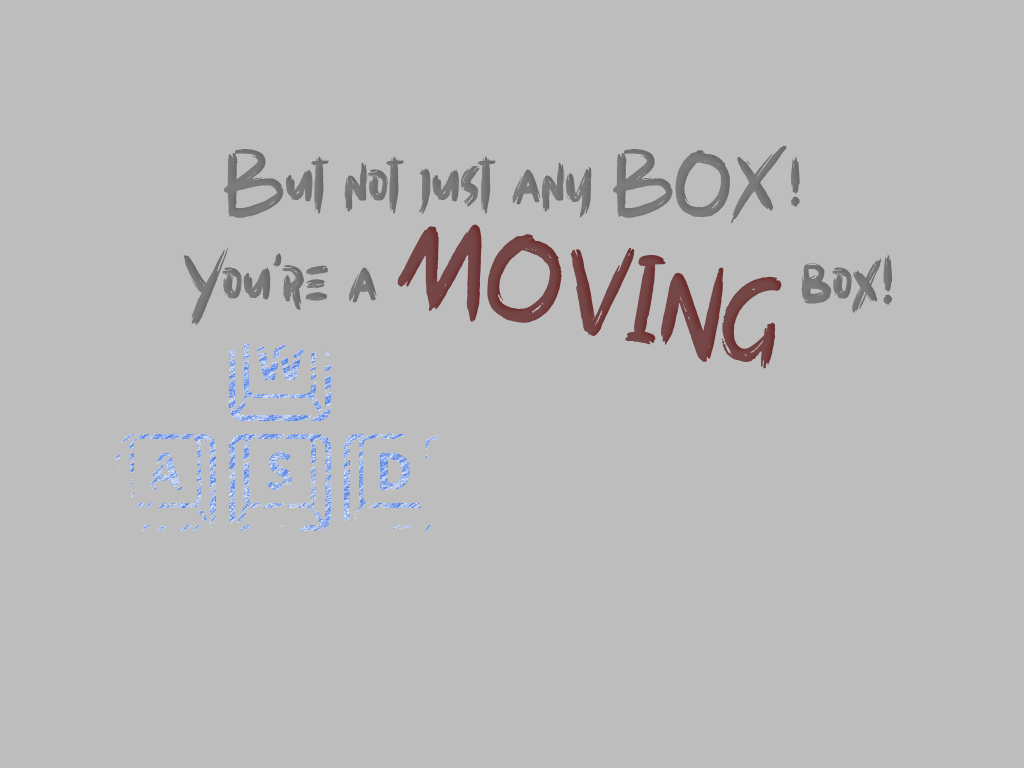
<style>
.page{position:relative;width:1024px;height:768px;background:#bdbdbd}
.page>*{position:absolute;margin:0}
.t1{font:96px "Westpart";color:#7b7b7b}
.t2{font:127px "Westpart";color:#754646}
</style>
<div class="page">
<p class="t1" style="left:223px;top:145px;width:577px;height:79px">But not just any BOX!</p>
<p class="t2" style="left:397px;top:224px;width:385px;height:145px;rotate:10deg">MOVING</p>
<p class="t1" style="left:183px;top:247px;width:710px;height:78px">You're a                      box!</p>
</div>
